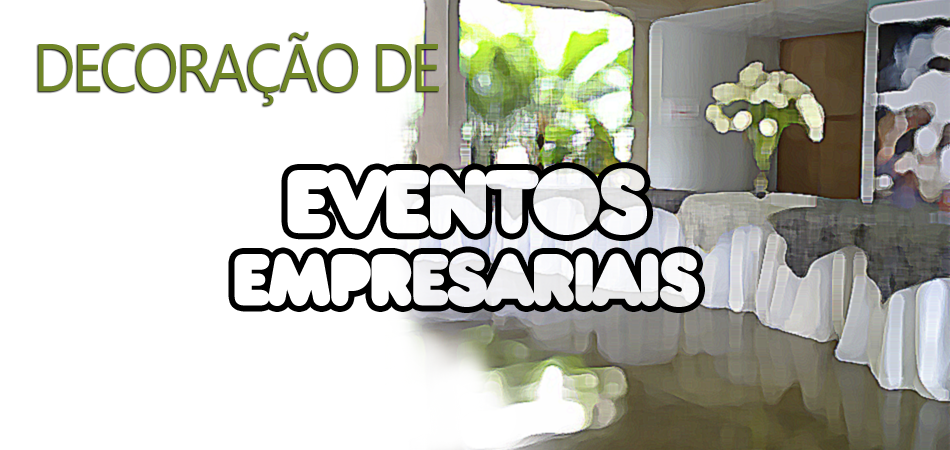
<style>
.page{position:relative;width:950px;height:450px;background:#ffffff}
.page>*{position:absolute;margin:0}
.t1{font:67.4px "SegoeUI";letter-spacing:-0.05em;color:#708627;text-transform:uppercase;scale:0.9 1}
.t2{font:94.8px "BarutaBlack";letter-spacing:-0.05em;color:#ffffff;text-transform:uppercase}
.t3{font:77.3px "BarutaBlack";letter-spacing:-0.05em;color:#ffffff;text-transform:uppercase}
</style>
<div class="page">
<p class="t1" style="left:38px;top:31px;width:401px;height:75px">dECORAÇÃO DE</p>
<p class="t2" style="left:287px;top:168px;width:360px;height:67px">EVENTOS</p>
<p class="t3" style="left:234px;top:252px;width:465px;height:55px">EMPRESARIAIS</p>
</div>
